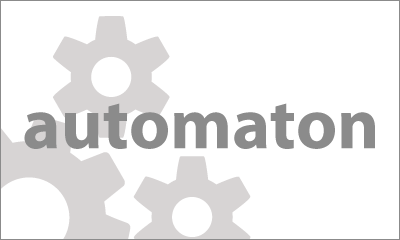
<style>
.page{position:relative;width:400px;height:240px;background:#ffffff}
.page>*{position:absolute;margin:0}
.t1{font:72px "MyriadPro-Bold";color:#8b8b8b}
</style>
<div class="page">
<p class="t1" style="left:24px;top:103px;width:351px;height:46px">automaton</p>
</div>
